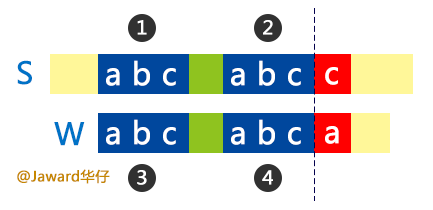
<style>
.page{position:relative;width:433px;height:210px;background:#ffffff}
.page>*{position:absolute;margin:0}
.t1{font:18.5px "MicrosoftYaHei";color:#ffffff;font-weight:bold;scale:1.04 1}
.t2{font:30px "MicrosoftYaHei";color:#0072c6;font-weight:bold}
.t3{font:30px "MicrosoftYaHei";color:#ffffff;font-weight:bold}
.t4{font:14px "MicrosoftYaHei";color:#c68700;font-weight:bold}
</style>
<div class="page">
<p class="t1" style="left:137px;top:20px;width:10px;height:15px">1</p>
<p class="t1" style="left:263px;top:20px;width:10px;height:15px">2</p>
<p class="t2" style="left:17px;top:60px;width:15px;height:25px">S</p>
<p class="t3" style="left:106px;top:60px;width:70px;height:26px">a b c</p>
<p class="t3" style="left:231px;top:60px;width:70px;height:26px">a b c</p>
<p class="t3" style="left:325px;top:67px;width:13px;height:18px">c</p>
<p class="t2" style="left:54px;top:122px;width:31px;height:24px">W</p>
<p class="t3" style="left:106px;top:119px;width:70px;height:26px">a b c</p>
<p class="t3" style="left:231px;top:119px;width:70px;height:26px">a b c</p>
<p class="t3" style="left:325px;top:126px;width:14px;height:18px">a</p>
<p class="t4" style="left:17px;top:169px;width:93px;height:15px">@Jaward华仔</p>
<p class="t1" style="left:137px;top:170px;width:10px;height:15px">3</p>
<p class="t1" style="left:262px;top:170px;width:11px;height:15px">4</p>
</div>
